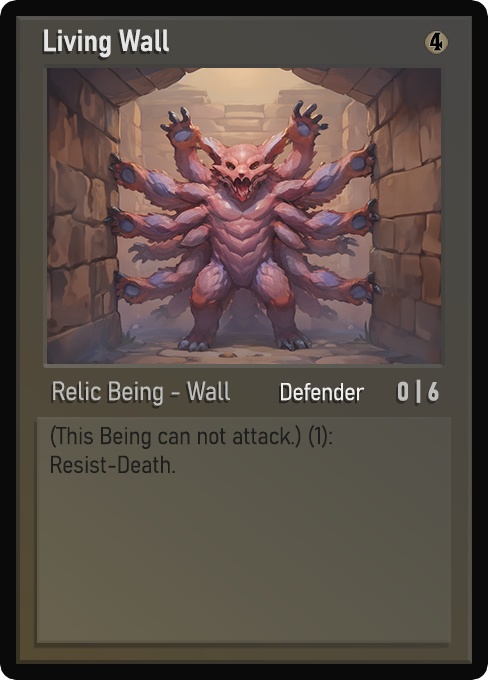
<style>
.page{position:relative;width:488px;height:680px}
.page>*{position:absolute;margin:0}
.t1{font:30px "Bahnschrift-SemiBoldSemiCondensed";color:#f2f2f2;font-weight:bold}
.t2{font:25px "WTRRoycroft";color:#000000;font-weight:bold;scale:1.09 1}
.t3{font:26px "Bahnschrift-LightSemiCondensed";color:#c8c8c8;font-weight:bold}
.t4{font:24px "Bahnschrift-LightSemiCondensed";color:#f0efef;font-weight:bold}
.t5{font:26px "Bahnschrift-BoldSemiCondensed";color:#bfbebd;font-weight:bold}
.t6{font:24px "Bahnschrift-LightSemiCondensed";color:#1e1e1e;font-weight:bold}
</style>
<div class="page">
<p class="t1" style="left:44px;top:29px;width:125px;height:29px;opacity:0.9">Living Wall</p>
<p class="t2" style="left:430px;top:32px;width:13px;height:19px">4</p>
<p class="t3" style="left:53px;top:381px;width:177px;height:25px;opacity:0.9">Relic Being - Wall</p>
<p class="t4" style="left:281px;top:383px;width:84px;height:18px">Defender</p>
<p class="t5" style="left:398px;top:379px;width:41px;height:24px">0 | 6</p>
<p class="t6" style="left:51px;top:425px;width:281px;height:49px">(This Being can not attack.) (1): Resist-Death.</p>
</div>
